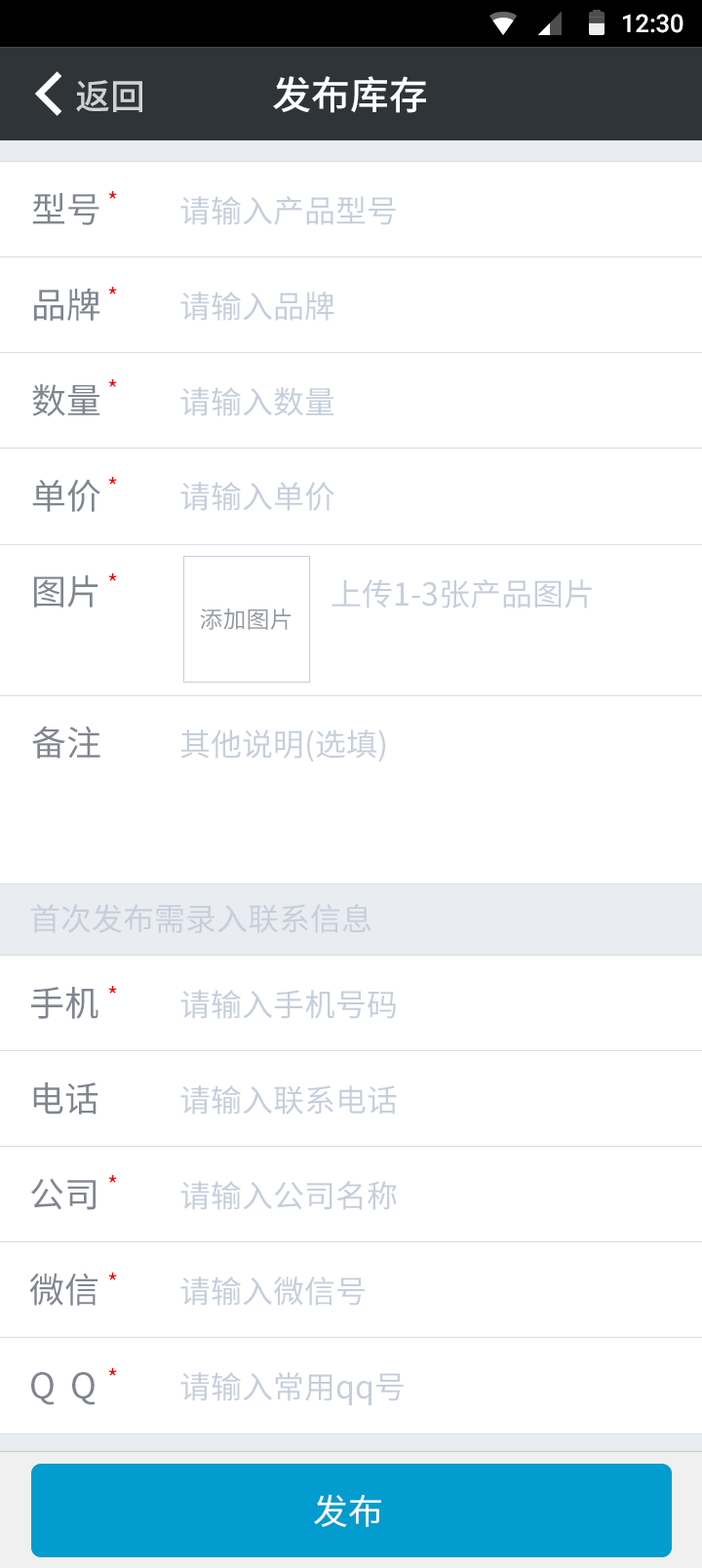
<style>
.page{position:relative;width:702px;height:1568px;background:#ffffff}
.page>*{position:absolute;margin:0}
.t1{font:39px "SourceHanSansCN-Medium";color:#ffffff}
.t2{font:35.1px "SourceHanSansCN-Medium";color:#d0d1d1}
.t3{font:35.1px "SourceHanSansCN-Regular";color:#80858f}
.t4{font:23.4px "SourceHanSansCN-Regular";color:#f70101}
.t5{font:31.2px "SourceHanSansCN-Regular";color:#c5cedb}
.t6{font:23.4px "SourceHanSansCN-Regular";color:#9398a0}
.t7{font:35.1px "SourceHanSansCN-Regular";color:#ffffff}
</style>
<div class="page">
<p class="t1" style="left:273px;top:76px;width:153px;height:37px">发布库存</p>
<p class="t2" style="left:76px;top:80px;width:66px;height:32px">返回</p>
<p class="t3" style="left:32px;top:193px;width:67px;height:32px">型号</p>
<p class="t4" style="left:108px;top:191px;width:9px;height:8px">*</p>
<p class="t5" style="left:180px;top:196px;width:216px;height:29px">请输入产品型号</p>
<p class="t3" style="left:34px;top:288px;width:66px;height:33px">品牌</p>
<p class="t4" style="left:108px;top:287px;width:9px;height:7px">*</p>
<p class="t5" style="left:180px;top:292px;width:154px;height:29px">请输入品牌</p>
<p class="t3" style="left:32px;top:384px;width:68px;height:32px">数量</p>
<p class="t4" style="left:108px;top:379px;width:9px;height:8px">*</p>
<p class="t5" style="left:180px;top:387px;width:154px;height:29px">请输入数量</p>
<p class="t3" style="left:32px;top:479px;width:68px;height:33px">单价</p>
<p class="t4" style="left:108px;top:477px;width:9px;height:8px">*</p>
<p class="t5" style="left:180px;top:482px;width:154px;height:29px">请输入单价</p>
<p class="t3" style="left:34px;top:575px;width:64px;height:33px">图片</p>
<p class="t4" style="left:108px;top:573px;width:9px;height:8px">*</p>
<p class="t5" style="left:332px;top:579px;width:260px;height:29px">上传1-3张产品图片</p>
<p class="t6" style="left:200px;top:608px;width:91px;height:22px">添加图片</p>
<p class="t3" style="left:32px;top:725px;width:68px;height:34px">备注</p>
<p class="t5" style="left:180px;top:729px;width:205px;height:34px">其他说明(选填)</p>
<p class="t5" style="left:30px;top:904px;width:342px;height:29px">首次发布需录入联系信息</p>
<p class="t3" style="left:31px;top:987px;width:67px;height:32px">手机</p>
<p class="t4" style="left:108px;top:986px;width:9px;height:8px">*</p>
<p class="t5" style="left:180px;top:990px;width:216px;height:29px">请输入手机号码</p>
<p class="t3" style="left:33px;top:1082px;width:65px;height:33px">电话</p>
<p class="t5" style="left:180px;top:1085px;width:217px;height:30px">请输入联系电话</p>
<p class="t3" style="left:31px;top:1178px;width:65px;height:32px">公司</p>
<p class="t4" style="left:108px;top:1175px;width:9px;height:8px">*</p>
<p class="t5" style="left:180px;top:1181px;width:217px;height:29px">请输入公司名称</p>
<p class="t3" style="left:29px;top:1273px;width:69px;height:33px">微信</p>
<p class="t4" style="left:108px;top:1273px;width:9px;height:7px">*</p>
<p class="t5" style="left:180px;top:1276px;width:185px;height:30px">请输入微信号</p>
<p class="t3" style="left:31px;top:1372px;width:65px;height:33px">Q  Q</p>
<p class="t4" style="left:108px;top:1368px;width:9px;height:8px">*</p>
<p class="t5" style="left:180px;top:1372px;width:224px;height:34px">请输入常用qq号</p>
<p class="t7" style="left:314px;top:1494px;width:67px;height:33px">发布</p>
</div>
